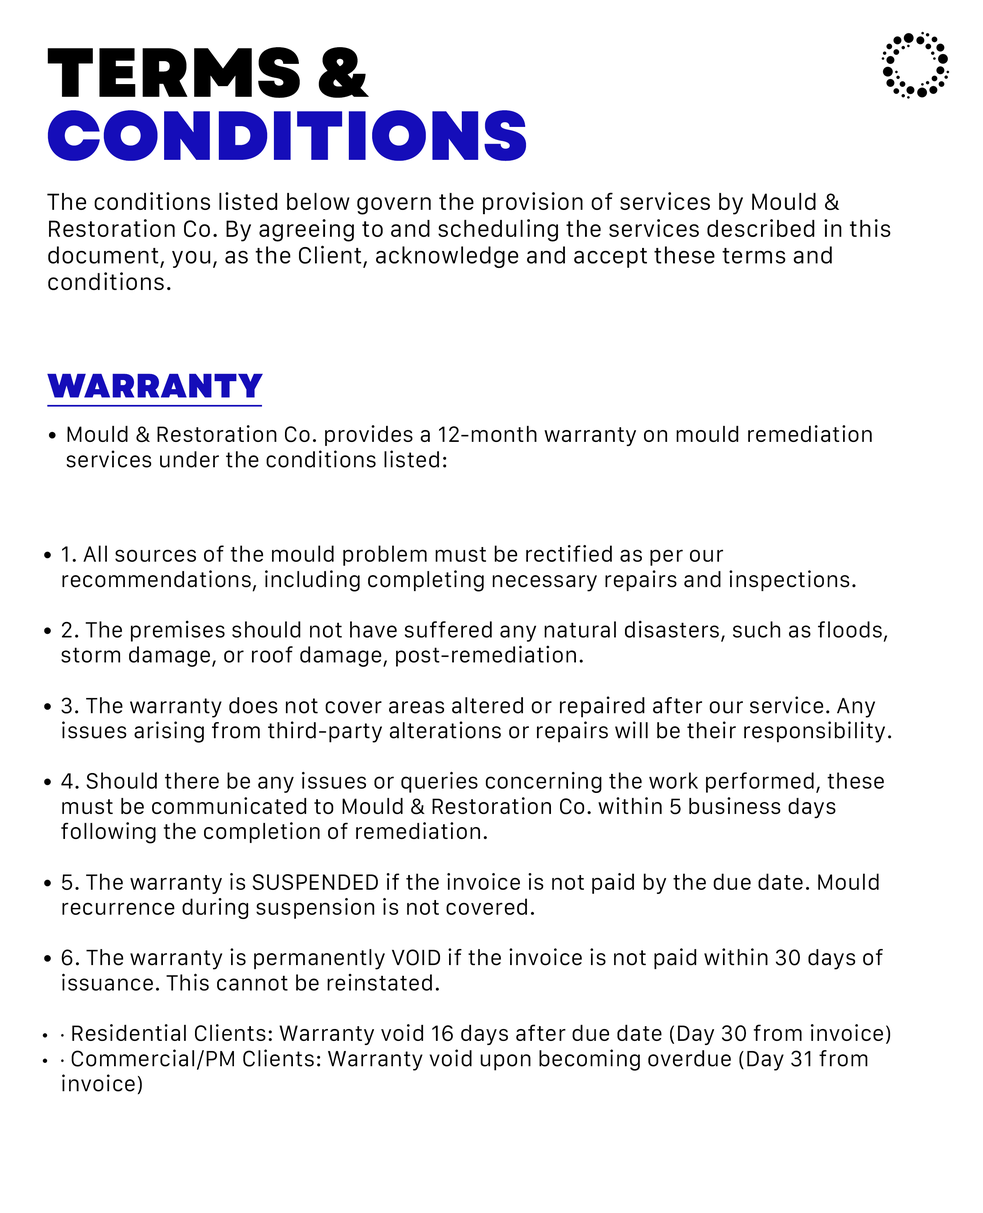
<style>
.page{position:relative;width:983px;height:1213px;background:#ffffff}
.page>*{position:absolute;margin:0}
.t1{font:69.4px/63px "Garet-Heavy";letter-spacing:0.005em;color:#150db9}
.t2{font:69.4px/63px "Garet-Heavy";letter-spacing:0.005em;color:#000000}
.t3{font:22.2px "Galvji";letter-spacing:0.005em;color:#000000}
.t4{font:33.8px "Garet-Heavy";letter-spacing:0.005em;color:#150db9;text-decoration:underline}
.t5{font:21px "Galvji";letter-spacing:0.005em;color:#000000}
.t6{font:21px "MyriadPro-Regular";letter-spacing:0.005em;color:#000000}
</style>
<div class="page">
<p class="t1" style="left:48px;top:47px;width:479px;height:114px;text-align:justify"><span class="t2">TERMS &amp;<br></span>CONDITIONS</p>
<p class="t3" style="left:47px;top:192px;width:844px;height:98px">The conditions listed below govern the provision of services by Mould &amp; Restoration Co. By agreeing to and scheduling the services described in this document, you, as the Client, acknowledge and accept these terms and conditions.</p>
<p class="t4" style="left:47px;top:374px;width:216px;height:32px">WARRANTY</p>
<p class="t5" style="left:49px;top:425px;width:823px;height:43px">Mould &amp; Restoration Co. provides a 12-month warranty on mould remediation services under the conditions listed:</p>
<p class="t5" style="left:43px;top:544px;width:849px;height:550px">1. All sources of the mould problem must be rectified as per our recommendations, including completing necessary repairs and inspections.<br><br>2. The premises should not have suffered any natural disasters, such as floods, storm damage, or roof damage, post-remediation.<br><br>3. The warranty does not cover areas altered or repaired after our service. Any issues arising from third-party alterations or repairs will be their responsibility.<br><br>4. Should there be any issues or queries concerning the work performed, these must be communicated to Mould &amp; Restoration Co. within 5 business days following the completion of remediation.<br><br>5. The warranty is SUSPENDED if the invoice is not paid by the due date. Mould recurrence during suspension is not covered.<br><br>6. The warranty is permanently VOID if the invoice is not paid within 30 days of issuance. This cannot be reinstated.<br><br><span class="t6">∙</span> Residential Clients: Warranty void 16 days after due date (Day 30 from invoice)<br><span class="t6">∙</span> Commercial/PM Clients: Warranty void upon becoming overdue (Day 31 from invoice)</p>
</div>
